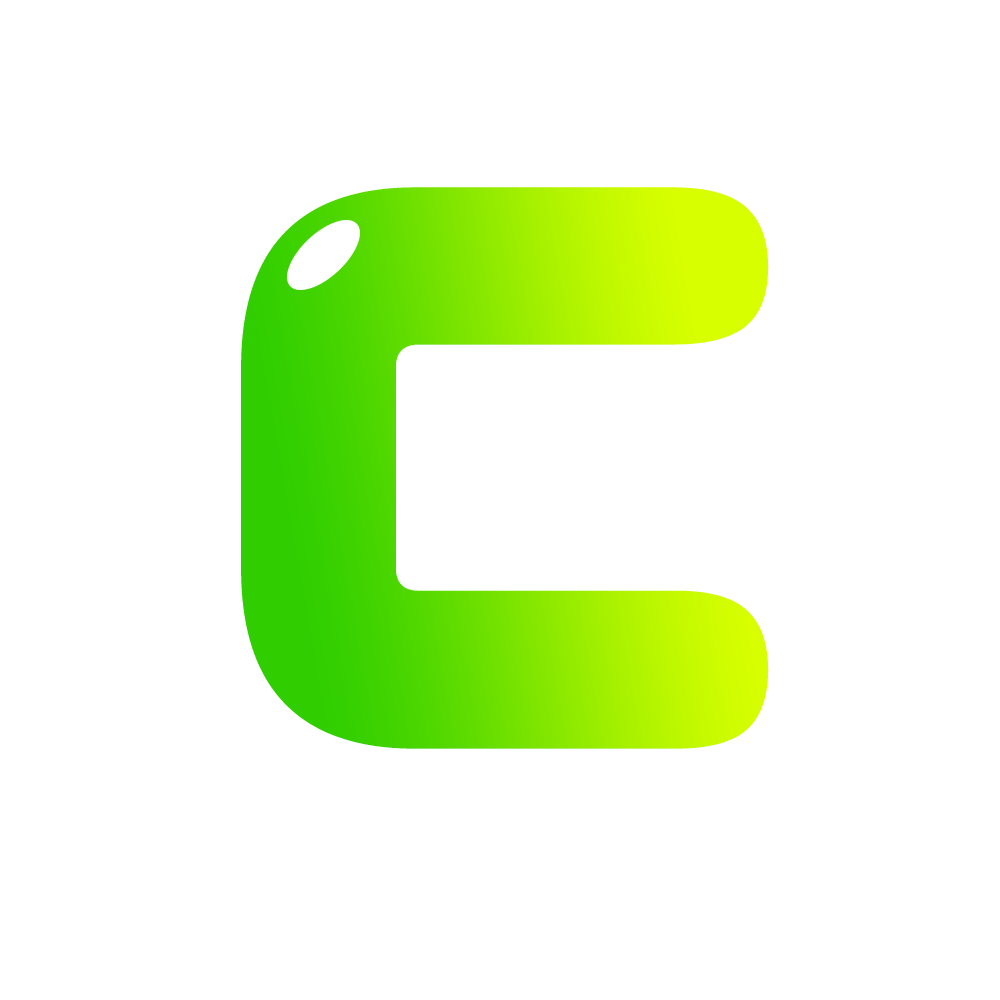
<style>
.page{position:relative;width:1000px;height:1000px;background:#ffffff}
.page>*{position:absolute;margin:0}
.t1{font:797.1px "Zorque-Regular"}
</style>
<div class="page">
<p class="t1" style="left:241px;top:187px;width:528px;height:562px">C</p>
<p class="t1" style="left:255px;top:193px;width:528px;height:562px">C</p>
</div>
